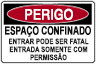
<style>
.page{position:relative;width:96px;height:64px;background:#ffffff}
.page>*{position:absolute;margin:0}
.t1{font:14.3px "Helvetica";color:#ffffff;font-weight:bold;scale:0.85 1}
.t2{font:11.6px "Arial-BoldMT";letter-spacing:-0.02em;color:#121212;font-weight:bold;scale:0.71 1}
.t3{font:7.6px/8px "Arial-BoldMT";letter-spacing:0.02em;color:#222222;scale:0.78 1}
</style>
<div class="page">
<p class="t1" style="left:25px;top:8px;width:48px;height:12px">PERIGO</p>
<p class="t2" style="left:5px;top:26px;width:86px;height:11px">ESPAÇO CONFINADO</p>
<p class="t3" style="left:9px;top:38px;width:80px;height:23px;text-align:center">ENTRAR PODE SER FATAL<br>ENTRADA SOMENTE COM<br>PERMISSÃO</p>
</div>
